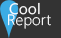
<style>
.page{position:relative;width:61px;height:38px;background:#333333}
.page>*{position:absolute;margin:0}
.t1{font:15px "SegoeUI";letter-spacing:0.01em;color:#ffffff}
.t2{font:15px "SegoeUI-Light";letter-spacing:0.01em;color:#ffffff}
</style>
<div class="page">
<p class="t1" style="left:9px;top:2px;width:31px;height:13px">Cool</p>
<p class="t2" style="left:8px;top:14px;width:43px;height:15px">Report</p>
</div>
